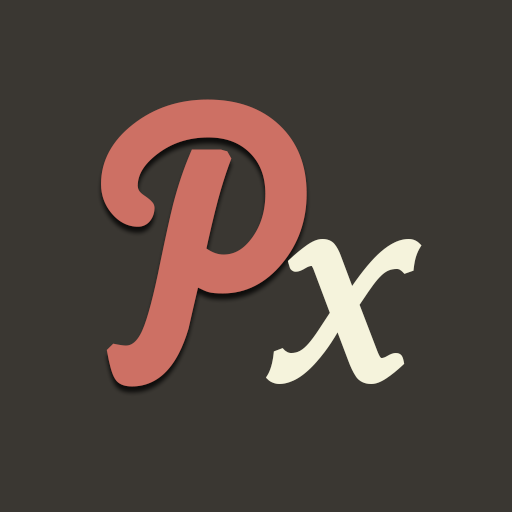
<style>
.page{position:relative;width:512px;height:512px;background:#3a3732}
.page>*{position:absolute;margin:0}
.t1{font:410px "JCfg";color:#cd7064;font-weight:bold;scale:0.95 1}
.t2{font:300px "Athelas-Italic";color:#f5f3dc;font-weight:bold;scale:0.95 1}
</style>
<div class="page">
<p class="t1" style="left:101px;top:99px;width:206px;height:288px">P</p>
<p class="t1" style="left:101px;top:99px;width:206px;height:288px">P</p>
<p class="t2" style="left:266px;top:239px;width:156px;height:145px">x</p>
<p class="t2" style="left:266px;top:239px;width:156px;height:145px">x</p>
</div>
